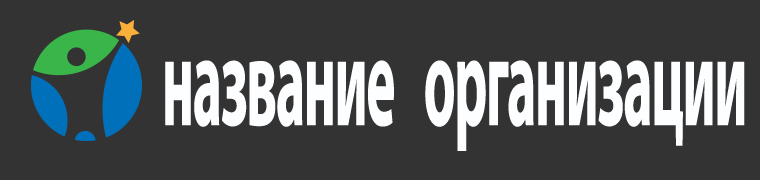
<style>
.page{position:relative;width:760px;height:180px;background:#333333}
.page>*{position:absolute;margin:0}
.t1{font:129.2px "MyriadPro-Bold";letter-spacing:-0.025em;color:#fdfeff;scale:0.43 1}
</style>
<div class="page">
<p class="t1" style="left:165px;top:60px;width:580px;height:91px">название   организации</p>
</div>
